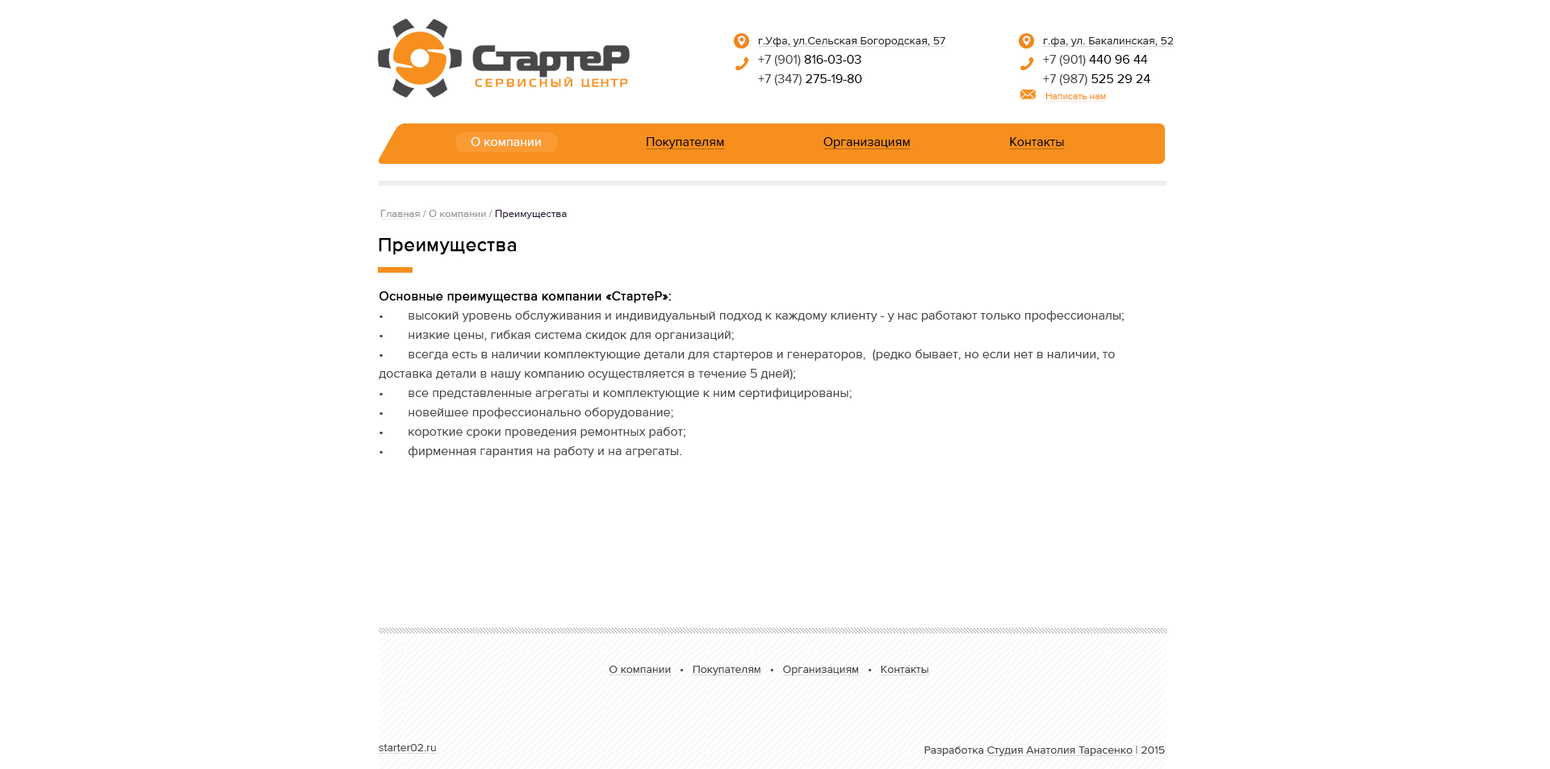
<style>
.page{position:relative;width:1550px;height:769px;background:#ffffff}
.page>*{position:absolute;margin:0}
.t1{font:11.3px/19.4px "amlgjlahnkgmkjoldgbpeifodofplkkf";color:#282828;text-decoration:underline}
.t2{font:12.9px/19.4px "amlgjlahnkgmkjoldgbpeifodofplkkf";color:#48484a}
.t3{font:12.9px/19.4px "amlgjlahnkgmkjoldgbpeifodofplkkf";color:#000000}
.t4{font:9.7px "amlgjlahnkgmkjoldgbpeifodofplkkf";color:#f68f1e;text-decoration:underline}
.t5{font:12.9px "amlgjlahnkgmkjoldgbpeifodofplkkf";color:#ffffff}
.t6{font:12.9px "amlgjlahnkgmkjoldgbpeifodofplkkf";color:#000000;text-decoration:underline}
.t7{font:10.5px "amlgjlahnkgmkjoldgbpeifodofplkkf";color:#2c1a37}
.t8{font:10.5px "amlgjlahnkgmkjoldgbpeifodofplkkf";color:#969696;text-decoration:underline}
.t9{font:10.5px "amlgjlahnkgmkjoldgbpeifodofplkkf";color:#969696}
.t10{font:19.4px "amlgjlahnkgmkjoldgbpeifodofplkkf";color:#010101;font-weight:bold}
.t11{font:12.9px/19.4px "amlgjlahnkgmkjoldgbpeifodofplkkf";color:#000000;font-weight:bold}
.t12{font:11.3px "amlgjlahnkgmkjoldgbpeifodofplkkf";color:#48484a;text-decoration:underline}
.t13{font:11.3px "amlgjlahnkgmkjoldgbpeifodofplkkf";color:#48484a}
</style>
<div class="page">
<p class="t1" style="left:758px;top:37px;width:188px;height:49px">г.Уфа, ул.Сельская Богородская, 57<br><span class="t2">+7 (901)</span><span class="t3"> 816-03-03<br></span><span class="t2">+7 (347)</span><span class="t3"> 275-19-80</span></p>
<p class="t1" style="left:1043px;top:37px;width:131px;height:49px">г.фа, ул. Бакалинская, 52<br><span class="t2">+7 (901)</span><span class="t3"> 440 96 44<br></span><span class="t2">+7 (987)</span><span class="t3"> 525 29 24</span></p>
<p class="t4" style="left:1045px;top:93px;width:62px;height:9px">Написать нам</p>
<p class="t5" style="left:471px;top:137px;width:70px;height:9px">О компании</p>
<p class="t6" style="left:646px;top:137px;width:419px;height:12px">Покупателям      Организациям      Контакты</p>
<p class="t7" style="left:380px;top:210px;width:187px;height:10px"><span class="t8">Главная</span><span class="t9"> / </span><span class="t8">О компании</span><span class="t9"> /</span> Преимущества</p>
<p class="t10" style="left:379px;top:238px;width:137px;height:17px">Преимущества</p>
<p class="t2" style="left:379px;top:291px;width:745px;height:167px"><span class="t11">Основные преимущества компании «СтартеР»: <br></span>• высокий уровень обслуживания и индивидуальный подход к каждому клиенту - у нас работают только профессионалы;<br>• низкие цены, гибкая система скидок для организаций;<br>• всегда есть в наличии комплектующие детали для стартеров и генераторов,  (редко бывает, но если нет в наличии, то доставка детали в нашу компанию осуществляется в течение 5 дней);<br>• все представленные агрегаты и комплектующие к ним сертифицированы;<br>• новейшее профессионально оборудование;<br>• короткие сроки проведения ремонтных работ;<br>• фирменная гарантия на работу и на агрегаты.</p>
<p class="t12" style="left:609px;top:666px;width:320px;height:10px">О компании<span class="t13">   •   </span>Покупателям<span class="t13">   •   </span>Организациям<span class="t13">   •   </span>Контакты</p>
<p class="t12" style="left:379px;top:744px;width:58px;height:10px">starter02.ru</p>
<p class="t12" style="left:924px;top:746px;width:241px;height:10px"><span class="t13">Разработка </span>Студия Анатолия Тарасенко<span class="t13"> | 2015</span></p>
</div>
